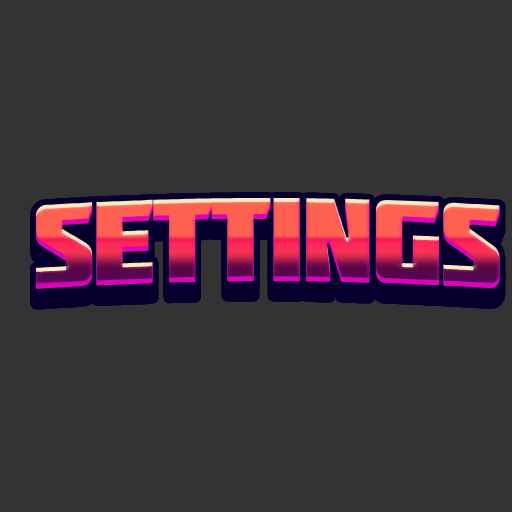
<style>
.page{position:relative;width:512px;height:512px;background:#333333}
.page>*{position:absolute;margin:0}
.t1{font:119px "Molot";letter-spacing:-0.025em}
</style>
<div class="page">
<p class="t1" style="left:35px;top:198px;width:465px;height:91px">SETTINGS</p>
</div>
